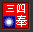
<style>
.page{position:relative;width:33px;height:32px;background:#f20000}
.page>*{position:absolute;margin:0}
.t1{font:10.4px "SimSun";color:#ffffff}
.t2{font:11.7px "SimSun";color:#ffffff}
</style>
<div class="page">
<p class="t1" style="left:6px;top:4px;width:19px;height:9px">三四</p>
<p class="t2" style="left:16px;top:15px;width:11px;height:12px">奉</p>
</div>
